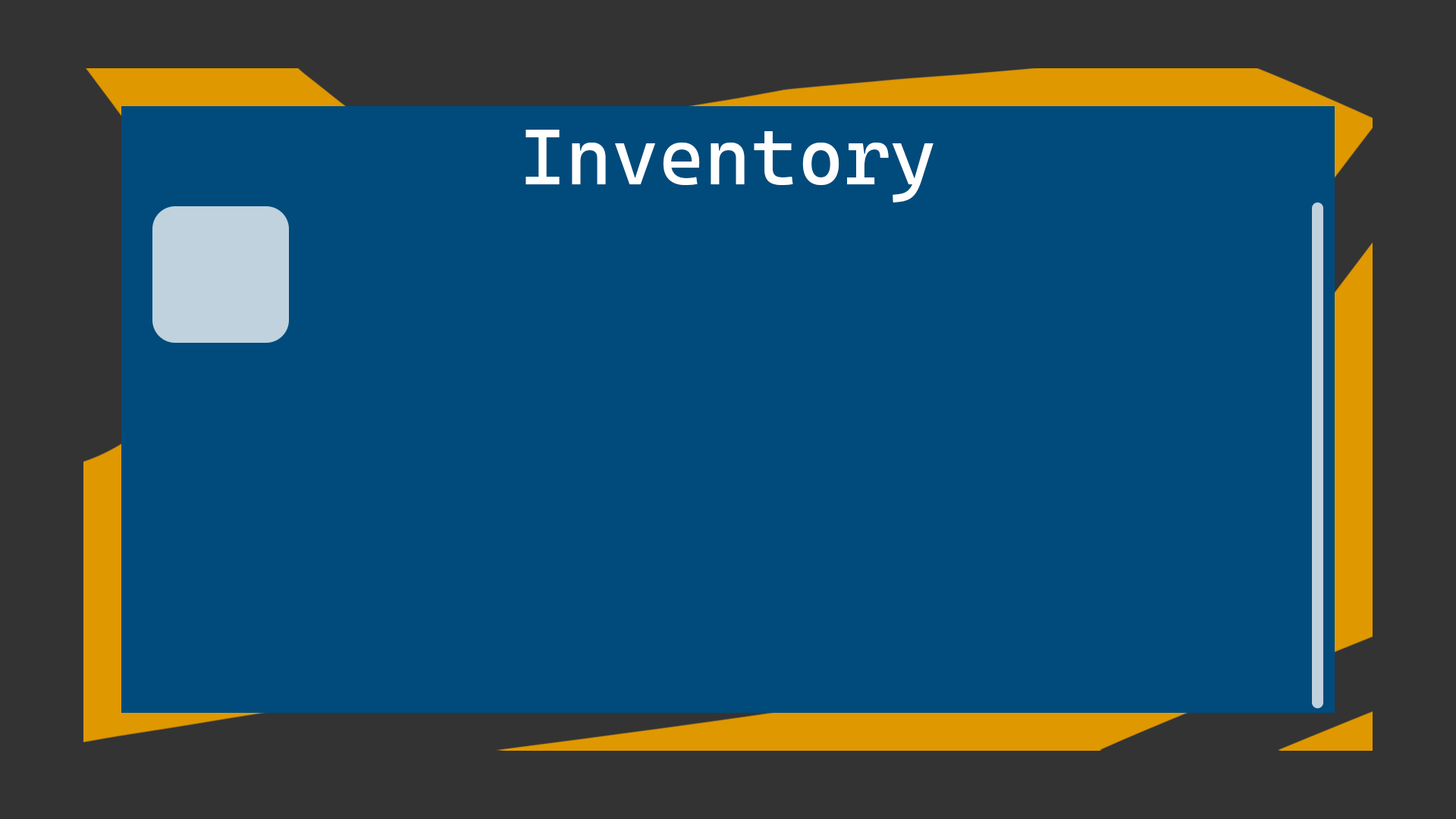
<style>
.page{position:relative;width:1456px;height:819px;background:#004b7c}
.page>*{position:absolute;margin:0}
.t1{font:79px "CascadiaCode-Regular";color:#ffffff}
</style>
<div class="page">
<p class="t1" style="left:526px;top:130px;width:407px;height:72px">Inventory</p>
</div>
